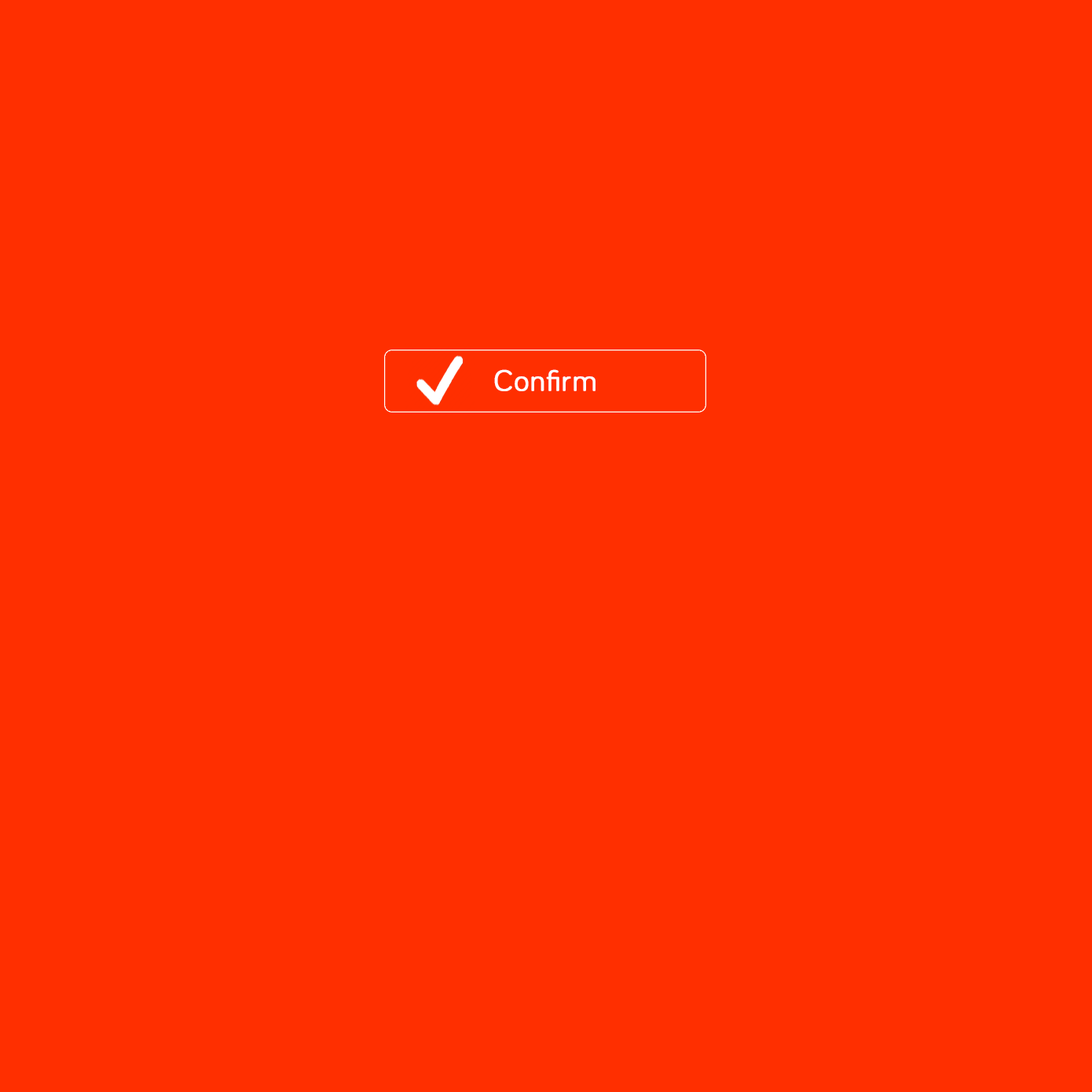
<style>
.page{position:relative;width:1092px;height:1092px;background:#ff2f00}
.page>*{position:absolute;margin:0}
.t1{font:30.1px "Bariol-Regular";letter-spacing:0.01em;color:#fefefe;font-weight:bold}
</style>
<div class="page">
<p class="t1" style="left:494px;top:369px;width:101px;height:22px">Confirm</p>
</div>
